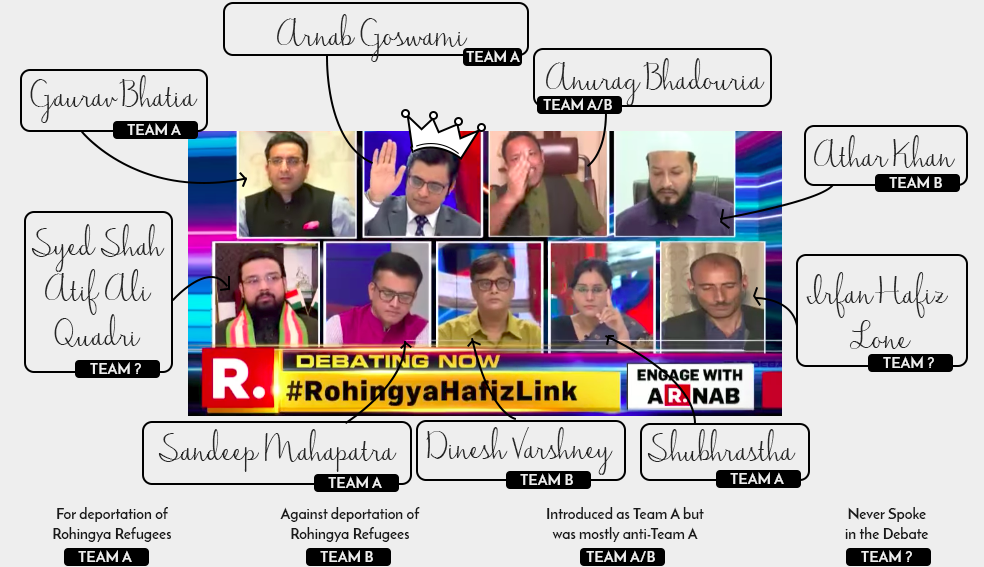
<style>
.page{position:relative;width:984px;height:567px;background:#eeeeee}
.page>*{position:absolute;margin:0}
.t1{font:50px "JasmineReminiscentse";color:#252525}
.t2{font:15px "JosefinSans-Bold";color:#eeeeee}
.t3{font:50px/45px "JasmineReminiscentse";color:#252525}
.t4{font:15px/20px "JosefinSans-Bold";color:#191919}
</style>
<div class="page">
<p class="t1" style="left:277px;top:14px;width:191px;height:48px">Arnab Goswami</p>
<p class="t2" style="left:466px;top:50px;width:54px;height:12px">TEAM A</p>
<p class="t1" style="left:546px;top:58px;width:219px;height:48px">Anurag Bhadouria</p>
<p class="t1" style="left:30px;top:75px;width:168px;height:48px">Gaurav Bhatia</p>
<p class="t2" style="left:543px;top:98px;width:69px;height:12px">TEAM A/B</p>
<p class="t2" style="left:127px;top:123px;width:54px;height:12px">TEAM A</p>
<p class="t1" style="left:814px;top:135px;width:141px;height:33px">Athar Khan</p>
<p class="t2" style="left:889px;top:176px;width:53px;height:12px">TEAM B</p>
<p class="t3" style="left:31px;top:224px;width:134px;height:123px;text-align:center">Syed Shah <br>Atif Ali <br>Quadri</p>
<p class="t3" style="left:806px;top:272px;width:142px;height:77px;text-align:center">Irfan Hafiz<br> Lone</p>
<p class="t2" style="left:90px;top:362px;width:51px;height:12px">TEAM ?</p>
<p class="t2" style="left:883px;top:356px;width:51px;height:12px">TEAM ?</p>
<p class="t1" style="left:158px;top:429px;width:239px;height:43px">Sandeep Mahapatra</p>
<p class="t1" style="left:426px;top:427px;width:187px;height:48px">Dinesh Varshney</p>
<p class="t1" style="left:647px;top:429px;width:149px;height:33px">Shubhrastha</p>
<p class="t2" style="left:520px;top:473px;width:53px;height:12px">TEAM B</p>
<p class="t2" style="left:730px;top:472px;width:54px;height:12px">TEAM A</p>
<p class="t2" style="left:328px;top:476px;width:54px;height:12px">TEAM A</p>
<p class="t4" style="left:53px;top:507px;width:118px;height:35px;text-align:center">For deportation of <br>Rohingya Refugees</p>
<p class="t4" style="left:280px;top:507px;width:140px;height:35px;text-align:center">Against deportation of <br>Rohingya Refugees</p>
<p class="t4" style="left:547px;top:507px;width:157px;height:35px;text-align:center">Introduced as Team A but <br>was mostly anti-Team A</p>
<p class="t4" style="left:845px;top:507px;width:84px;height:32px;text-align:center">Never Spoke <br>in the Debate</p>
<p class="t2" style="left:78px;top:550px;width:54px;height:12px">TEAM A</p>
<p class="t2" style="left:320px;top:550px;width:53px;height:12px">TEAM B</p>
<p class="t2" style="left:586px;top:550px;width:69px;height:12px">TEAM A/B</p>
<p class="t2" style="left:861px;top:550px;width:51px;height:12px">TEAM ?</p>
</div>
